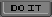
<style>
.page{position:relative;width:52px;height:17px}
.page>*{position:absolute;margin:0}
.t1{font:8.5px "RetroComputer";color:#000000}
</style>
<div class="page">
<p class="t1" style="left:11px;top:5px;width:30px;height:6px">DO IT</p>
</div>
